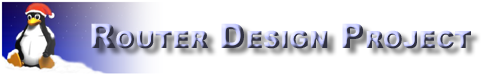
<style>
.page{position:relative;width:491px;height:75px;background:#ffffff}
.page>*{position:absolute;margin:0}
.t1{font:34px "Arial-Black";font-variant:small-caps}
</style>
<div class="page">
<p class="t1" style="left:91px;top:23px;width:380px;height:26px">Router Design Project</p>
</div>
